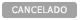
<style>
.page{position:relative;width:80px;height:20px;background:#a2a2a2}
.page>*{position:absolute;margin:0}
.t1{font:9px "WineTahomaBold";color:#fcf8f8}
</style>
<div class="page">
<p class="t1" style="left:12px;top:6px;width:55px;height:8px">CANCELADO</p>
</div>
